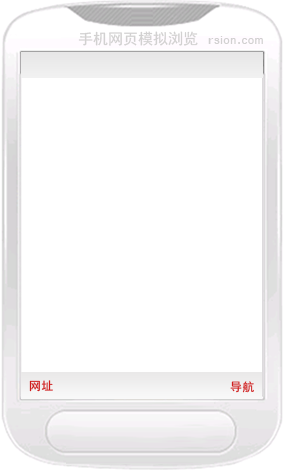
<style>
.page{position:relative;width:284px;height:472px;background:#ffffff}
.page>*{position:absolute;margin:0}
.t1{font:15px "SimHei";color:#d2d1d1}
.t2{font:11.7px "Vrinda";letter-spacing:0.075em;color:#d2d1d1}
.t3{font:10.8px "Tahoma";letter-spacing:0.075em;color:#d2d1d1;scale:1.3 1}
.t4{font:11.7px "SimHei";letter-spacing:0.075em;color:#cf1d1d}
</style>
<div class="page">
<p class="t1" style="left:78px;top:31px;width:120px;height:15px">手机网页模拟浏览</p>
<p class="t2" style="left:208px;top:36px;width:55px;height:8px"><span class="t3">r</span>sion.com</p>
<p class="t4" style="left:29px;top:380px;width:24px;height:12px">网址</p>
<p class="t4" style="left:230px;top:381px;width:24px;height:12px">导航</p>
</div>
